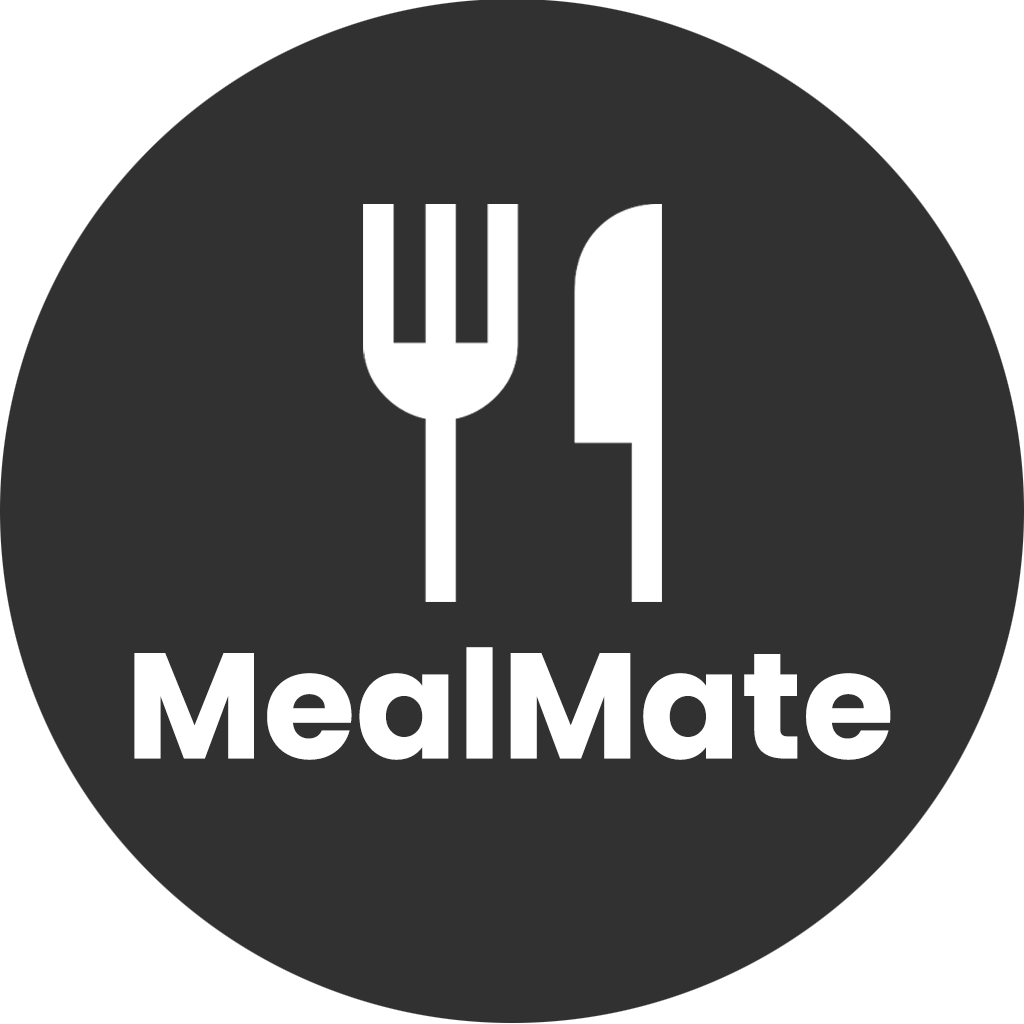
<style>
.page{position:relative;width:1024px;height:1024px;background:#313131}
.page>*{position:absolute;margin:0}
.t1{font:150px "Poppins-Bold";color:#ffffff}
</style>
<div class="page">
<p class="t1" style="left:134px;top:647px;width:757px;height:113px">MealMate</p>
</div>
